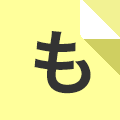
<style>
.page{position:relative;width:120px;height:120px;background:#ffff9b}
.page>*{position:absolute;margin:0}
.t1{font:72px "HiraKakuPro-W6";color:#333333}
</style>
<div class="page">
<p class="t1" style="left:34px;top:31px;width:57px;height:63px">も</p>
</div>
